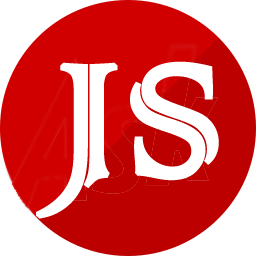
<style>
.page{position:relative;width:256px;height:256px;background:#ffffff}
.page>*{position:absolute;margin:0}
.t1{font:210px "ColonnaMT";color:#ffffff;font-weight:bold}
</style>
<div class="page">
<p class="t1" style="left:36px;top:61px;width:183px;height:158px">JS</p>
</div>
